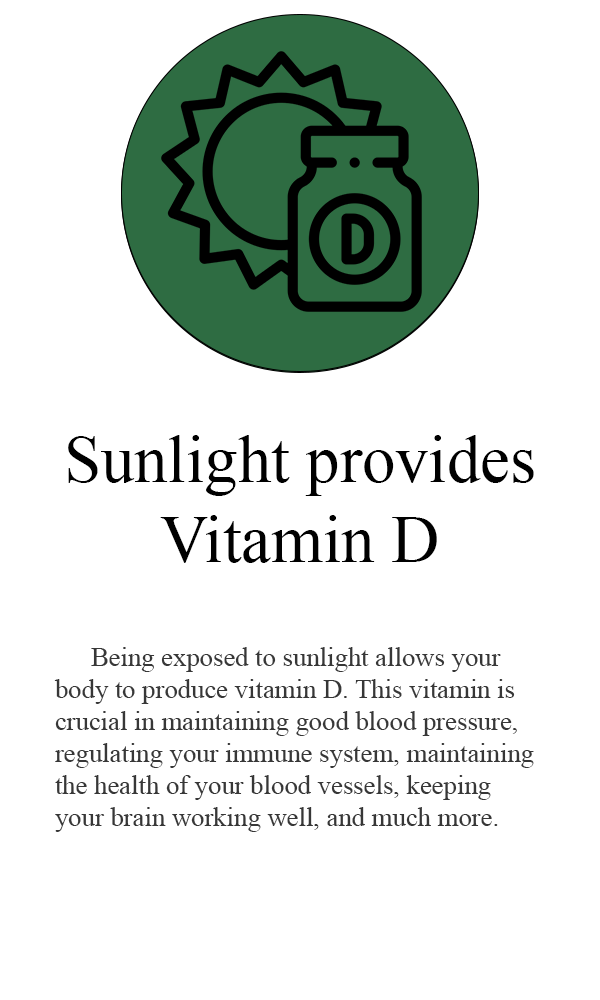
<style>
.page{position:relative;width:600px;height:1000px;background:#ffffff}
.page>*{position:absolute;margin:0}
.t1{font:26.7px "TimesNewRomanPSMT";color:#373737}
.t2{font:66.7px "TimesNewRomanPSMT";color:#000000}
</style>
<div class="page">
<p class="t1" style="left:54px;top:435px;width:480px;height:397px;text-align:center"><span class="t2">Sunlight provides Vitamin D<br><br>  <br></span> Being exposed to sunlight allows your body to produce vitamin D. This vitamin is crucial in maintaining good blood pressure, regulating your immune system, maintaining the health of your blood vessels, keeping your brain working well, and much more.</p>
</div>
